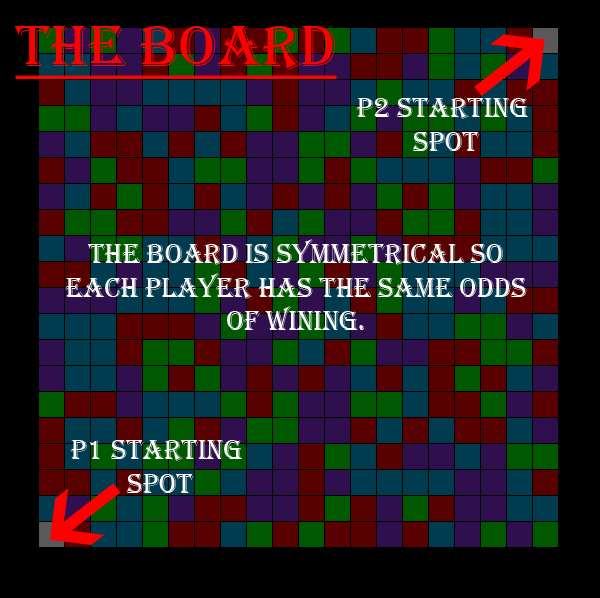
<style>
.page{position:relative;width:600px;height:598px;background:#000000}
.page>*{position:absolute;margin:0}
.t1{font:60px "Algerian";color:#ff0000;text-decoration:underline}
.t2{font:28px "Algerian";color:#fefefe}
</style>
<div class="page">
<p class="t1" style="left:14px;top:26px;width:323px;height:53px">The board</p>
<p class="t2" style="left:356px;top:98px;width:172px;height:53px;text-align:center">p2 starting <br>spot</p>
<p class="t2" style="left:65px;top:239px;width:462px;height:91px;text-align:center">The board is symmetrical so<br>each player has the same odds<br>of wining.</p>
<p class="t2" style="left:70px;top:440px;width:172px;height:53px;text-align:center">p1 starting <br>spot</p>
</div>
